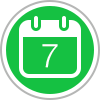
<style>
.page{position:relative;width:100px;height:100px;background:#ffffff}
.page>*{position:absolute;margin:0}
.t1{font:33.3px "HelveticaNeue-Light";letter-spacing:-0.01em;color:#ffffff}
.t2{font:33.3px "HelveticaNeue-Light";letter-spacing:-0.01em;color:#003d7f}
</style>
<div class="page">
<p class="t1" style="left:42px;top:44px;width:16px;height:24px">7<span class="t2">7</span></p>
</div>
